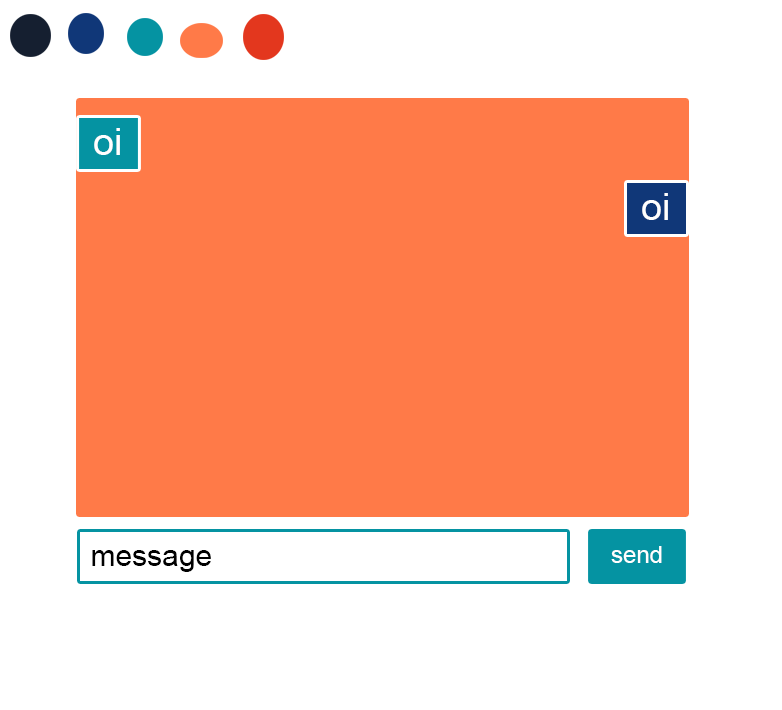
<style>
.page{position:relative;width:782px;height:710px;background:#ffffff}
.page>*{position:absolute;margin:0}
.t1{font:38px "ArialMT";color:#ffffff}
.t2{font:30px "ArialMT";color:#000000}
</style>
<div class="page">
<p class="t1" style="left:94px;top:128px;width:26px;height:27px">oi</p>
<p class="t1" style="left:642px;top:193px;width:26px;height:27px">oi</p>
<p class="t2" style="left:92px;top:550px;width:119px;height:22px">message</p>
</div>
